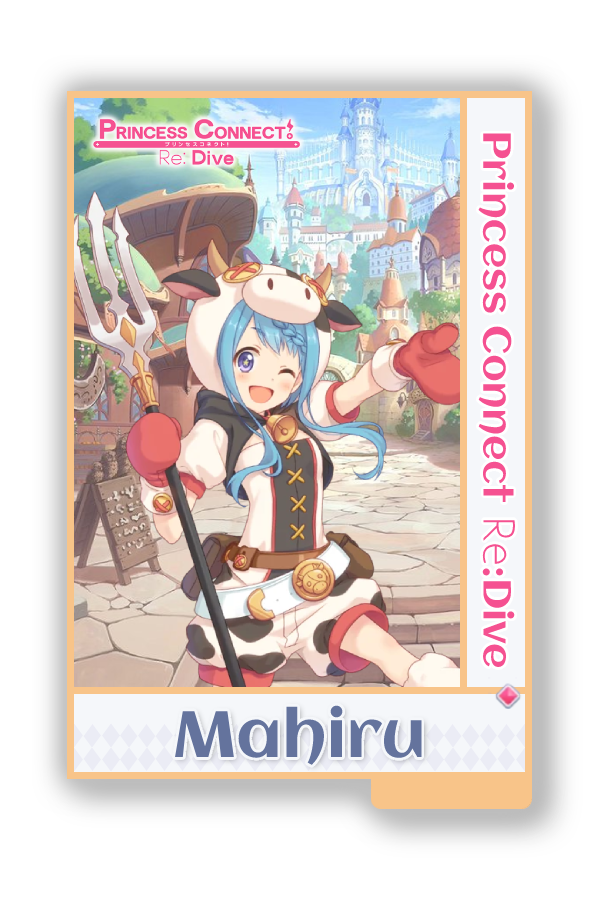
<style>
.page{position:relative;width:600px;height:900px;background:#ffffff}
.page>*{position:absolute;margin:0}
.t1{font:39px "Aclonica-Regular";color:#f55191}
.t2{font:39px "AaarghNormal";color:#f55191}
.t3{font:65px "Aclonica-Regular";color:#64739d}
</style>
<div class="page">
<p class="t1" style="left:478px;top:133px;width:38px;height:534px;rotate:90deg">Princess Connect <span class="t2">Re</span>:Dive</p>
<p class="t3" style="left:175px;top:705px;width:247px;height:60px">Mahiru</p>
</div>
